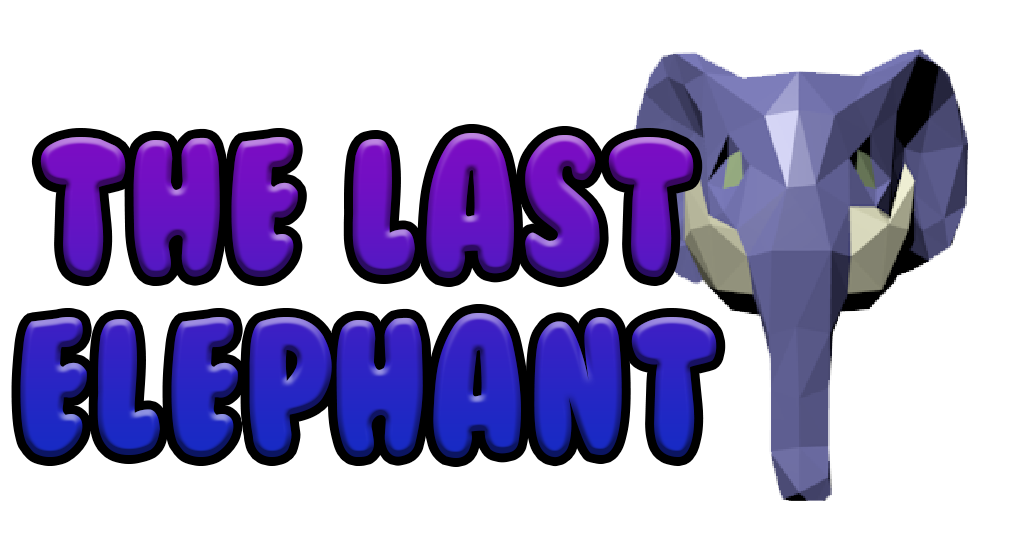
<style>
.page{position:relative;width:1015px;height:550px;background:#ffffff}
.page>*{position:absolute;margin:0}
.t1{font:180.1px "BubbleGum";letter-spacing:0.02em;scale:0.83 1}
</style>
<div class="page">
<p class="t1" style="left:20px;top:133px;width:697px;height:325px;text-align:center">The Last<br>Elephant</p>
</div>
